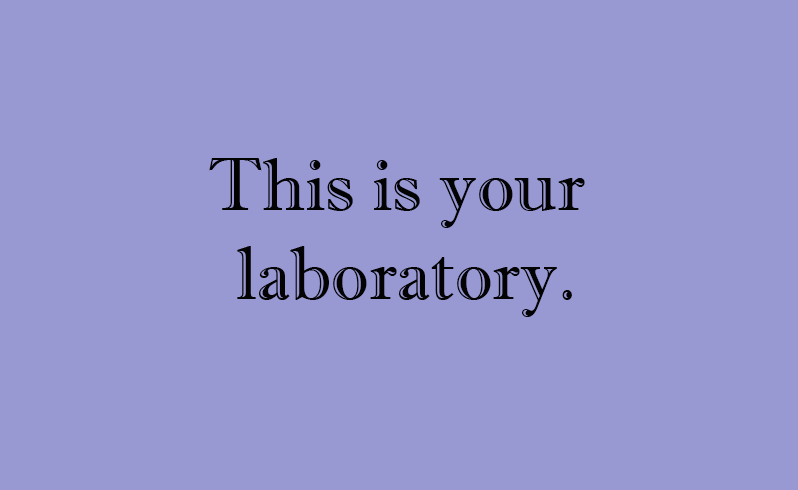
<style>
.page{position:relative;width:798px;height:490px;background:#9898d3}
.page>*{position:absolute;margin:0}
.t1{font:74.8px "ImprintMT-Shadow";color:#030303}
</style>
<div class="page">
<p class="t1" style="left:209px;top:158px;width:376px;height:159px;text-align:center">This is your <br>laboratory.</p>
</div>
